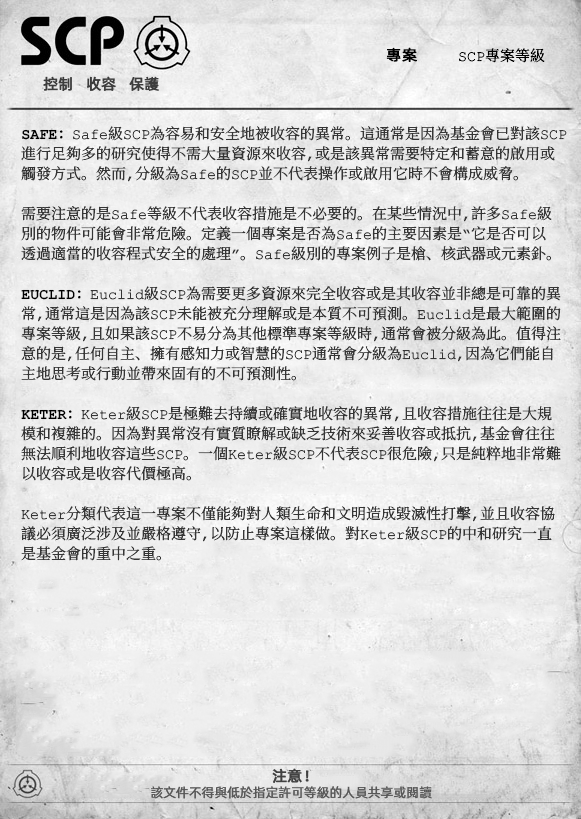
<style>
.page{position:relative;width:581px;height:819px}
.page>*{position:absolute;margin:0}
.t1{font:15px "ContainmentBreach-Regular";color:#000000}
.t2{font:15px "AlibabaPuHuiTiR";color:#000000;font-weight:bold}
.t3{font:15px "AlibabaPuHuiTiR";color:#3d3d3d;font-weight:bold}
.t4{font:15px/20px "ContainmentBreach-Regular";color:#353535}
.t5{font:15px/20px "ContainmentBreach-Bold";color:#000000}
.t6{font:15px "AlibabaPuHuiTiR";color:#414141;font-weight:bold}
.t7{font:13px "AlibabaPuHuiTiR";color:#575757}
</style>
<div class="page">
<p class="t1" style="left:386px;top:47px;width:159px;height:16px"><span class="t2">專案  </span>SCP專案等級</p>
<p class="t3" style="left:43px;top:76px;width:116px;height:15px">控制   收容   保護</p>
<p class="t4" style="left:21px;top:126px;width:546px;height:435px"><span class="t5">SAFE：</span>Safe級SCP為容易和安全地被收容的異常。這通常是因為基金會已對該SCP<br>進行足夠多的研究使得不需大量資源來收容，或是該異常需要特定和蓄意的啟用或<br>觸發方式。然而，分級為Safe的SCP並不代表操作或啟用它時不會構成威脅。<br><br>需要注意的是Safe等級不代表收容措施是不必要的。在某些情況中，許多Safe級<br>別的物件可能會非常危險。定義一個專案是否為Safe的主要因素是“它是否可以<br>透過適當的收容程式安全的處理”。Safe級別的專案例子是槍、核武器或元素釙。<br><br><span class="t5">EUCLID：</span>Euclid級SCP為需要更多資源來完全收容或是其收容並非總是可靠的異<br>常，通常這是因為該SCP未能被充分理解或是本質不可預測。Euclid是最大範圍的<br>專案等級，且如果該SCP不易分為其他標準專案等級時，通常會被分級為此。值得注<br>意的是，任何自主、擁有感知力或智慧的SCP通常會分級為Euclid，因為它們能自<br>主地思考或行動並帶來固有的不可預測性。<br><br><span class="t5">KETER：</span>Keter級SCP是極難去持續或確實地收容的異常，且收容措施往往是大規<br>模和複雜的。因為對異常沒有實質瞭解或缺乏技術來妥善收容或抵抗，基金會往往<br>無法順利地收容這些SCP。一個Keter級SCP不代表SCP很危險，只是純粹地非常難<br>以收容或是收容代價極高。<br><br>Keter分類代表這一專案不僅能夠對人類生命和文明造成毀滅性打擊，並且收容協<br>議必須廣泛涉及並嚴格遵守，以防止專案這樣做。對Keter級SCP的中和研究一直<br>是基金會的重中之重。</p>
<p class="t6" style="left:272px;top:768px;width:37px;height:15px">注意！</p>
<p class="t7" style="left:151px;top:786px;width:281px;height:13px">該文件不得與低於指定許可等級的人員共享或閱讀</p>
</div>
